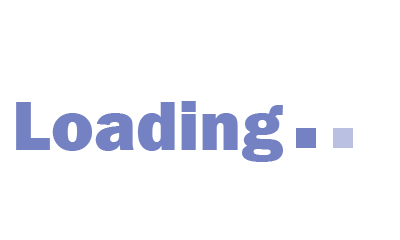
<style>
.page{position:relative;width:400px;height:240px;background:#ffffff}
.page>*{position:absolute;margin:0}
.t1{font:72px "FranklinGothic-Heavy";color:#7481c3}
</style>
<div class="page">
<p class="t1" style="left:16px;top:101px;width:267px;height:61px">Loading</p>
</div>
